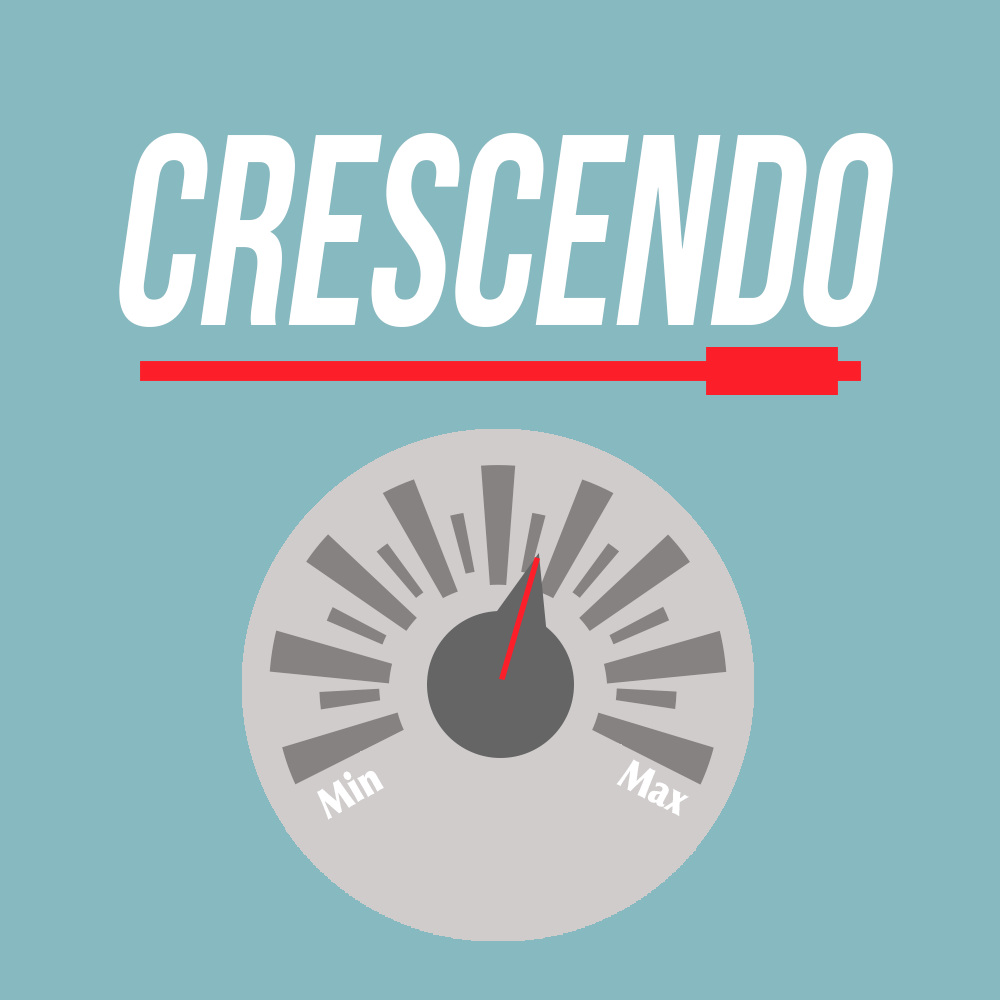
<style>
.page{position:relative;width:1000px;height:1000px;background:#87b9c0}
.page>*{position:absolute;margin:0}
.t1{font:271px "BebasNeue";color:#ffffff;font-style:italic;scale:0.81 1}
.t2{font:119.9px "Optima-ExtraBlack";color:#878282;scale:0.81 1}
.t3{font:59.9px "Optima-ExtraBlack";color:#878282;scale:0.81 1}
.t4{font:42px "Optima-ExtraBlack";color:#ffffff;scale:0.81 1}
</style>
<div class="page">
<p class="t1" style="left:119px;top:133px;width:774px;height:194px">CRESCENDo</p>
<p class="t2" style="left:269px;top:465px;width:458px;height:219px;text-align:center">|<span class="t3">|</span>|<span class="t3">|</span>|<span class="t3">|</span>|<span class="t3">|</span>|<span class="t3">|</span>|<span class="t3">|</span>|</p>
<p class="t4" style="left:616px;top:759px;width:73px;height:58px;rotate:27deg">Max</p>
<p class="t4" style="left:317px;top:771px;width:67px;height:49px;rotate:-30deg">Min</p>
</div>
